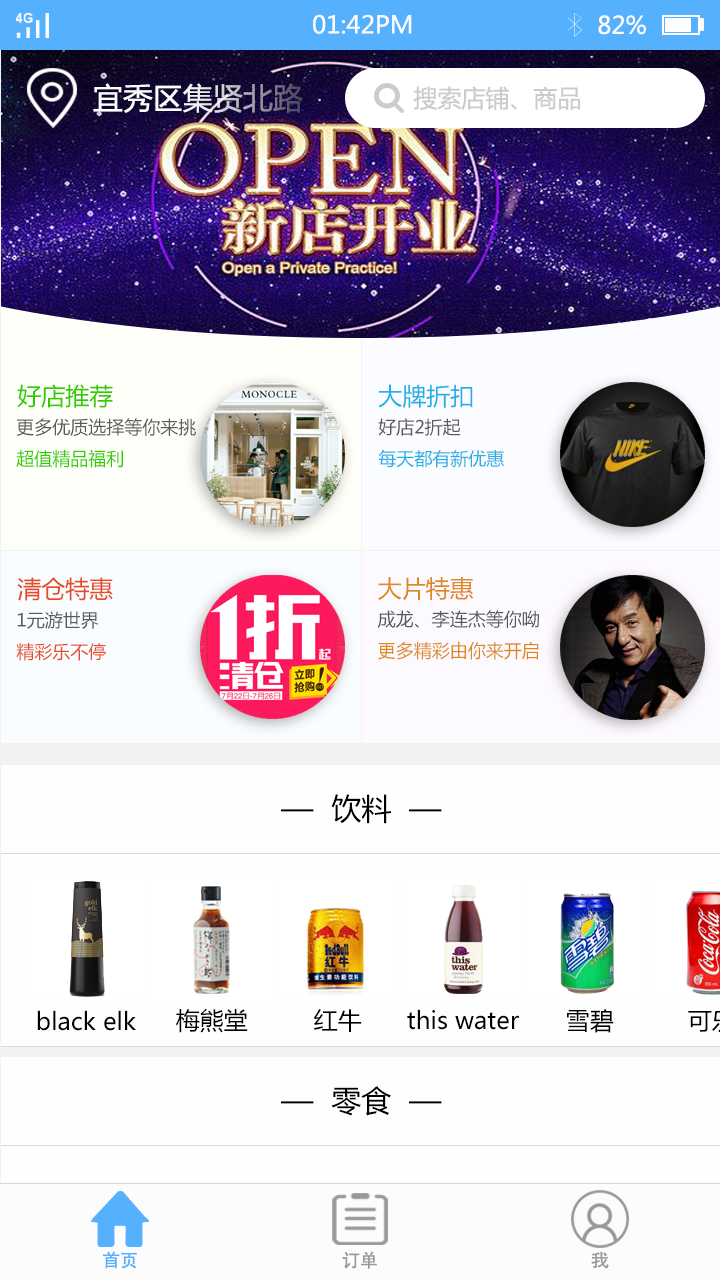
<style>
.page{position:relative;width:720px;height:1280px;background:#fffefe}
.page>*{position:absolute;margin:0}
.t1{font:24px "MicrosoftYaHei";color:#fbfdfc}
.t2{font:30px "MicrosoftYaHei"}
.t3{font:24px "MicrosoftYaHei";color:#cacaca}
.t4{font:24px "MicrosoftYaHei";color:#33cc00}
.t5{font:24px "MicrosoftYaHei";color:#26aee6}
.t6{font:18px "MicrosoftYaHei";color:#5a5a5a}
.t7{font:18px "MicrosoftYaHei";color:#33cc00}
.t8{font:18px "MicrosoftYaHei";color:#26aee6}
.t9{font:24px "MicrosoftYaHei";color:#e64a26}
.t10{font:24px "MicrosoftYaHei";color:#df8821}
.t11{font:18px "MicrosoftYaHei";color:#e64a26}
.t12{font:18px "MicrosoftYaHei";color:#df8821}
.t13{font:30px "MicrosoftYaHei";color:#000000}
.t14{font:24px "MicrosoftYaHei";color:#000000}
.t15{font:18px "AdobeHeitiStd-Regular";color:#55b0fe}
.t16{font:18px "AdobeHeitiStd-Regular";color:#999999}
.t17{font:18px "AdobeHeitiStd-Regular";color:#999999;scale:1.05 1}
</style>
<div class="page">
<p class="t1" style="left:313px;top:14px;width:99px;height:20px">01:42PM</p>
<p class="t1" style="left:598px;top:15px;width:48px;height:20px">82%</p>
<p class="t2" style="left:93px;top:83px;width:210px;height:30px">宜秀区集贤北路</p>
<p class="t3" style="left:413px;top:86px;width:167px;height:24px;opacity:0.96">搜索店铺、商品</p>
<p class="t4" style="left:17px;top:384px;width:96px;height:24px">好店推荐</p>
<p class="t5" style="left:378px;top:384px;width:95px;height:24px">大牌折扣</p>
<p class="t6" style="left:16px;top:418px;width:180px;height:50px">更多优质选择等你来挑<br><span class="t7">超值精品福利</span></p>
<p class="t8" style="left:378px;top:418px;width:126px;height:50px"><span class="t6">好店2折起<br></span>每天都有新优惠</p>
<p class="t9" style="left:17px;top:577px;width:96px;height:24px">清仓特惠</p>
<p class="t10" style="left:378px;top:577px;width:96px;height:24px">大片特惠</p>
<p class="t6" style="left:16px;top:611px;width:90px;height:50px">1元游世界<br><span class="t11">精彩乐不停</span></p>
<p class="t6" style="left:377px;top:610px;width:162px;height:50px">成龙、李连杰等你呦<br><span class="t12">更多精彩由你来开启</span></p>
<p class="t13" style="left:281px;top:794px;width:161px;height:30px">—  饮料  —</p>
<p class="t14" style="left:37px;top:1010px;width:99px;height:21px">black elk</p>
<p class="t14" style="left:176px;top:1008px;width:72px;height:25px">梅熊堂</p>
<p class="t14" style="left:314px;top:1009px;width:48px;height:23px">红牛</p>
<p class="t14" style="left:407px;top:1009px;width:112px;height:21px">this water</p>
<p class="t14" style="left:567px;top:1009px;width:47px;height:24px">雪碧</p>
<p class="t13" style="left:281px;top:1086px;width:161px;height:30px">—  零食  —</p>
<p class="t15" style="left:103px;top:1251px;width:34px;height:18px">首页</p>
<p class="t16" style="left:342px;top:1251px;width:35px;height:18px">订单</p>
<p class="t17" style="left:591px;top:1251px;width:18px;height:18px">我</p>
</div>
